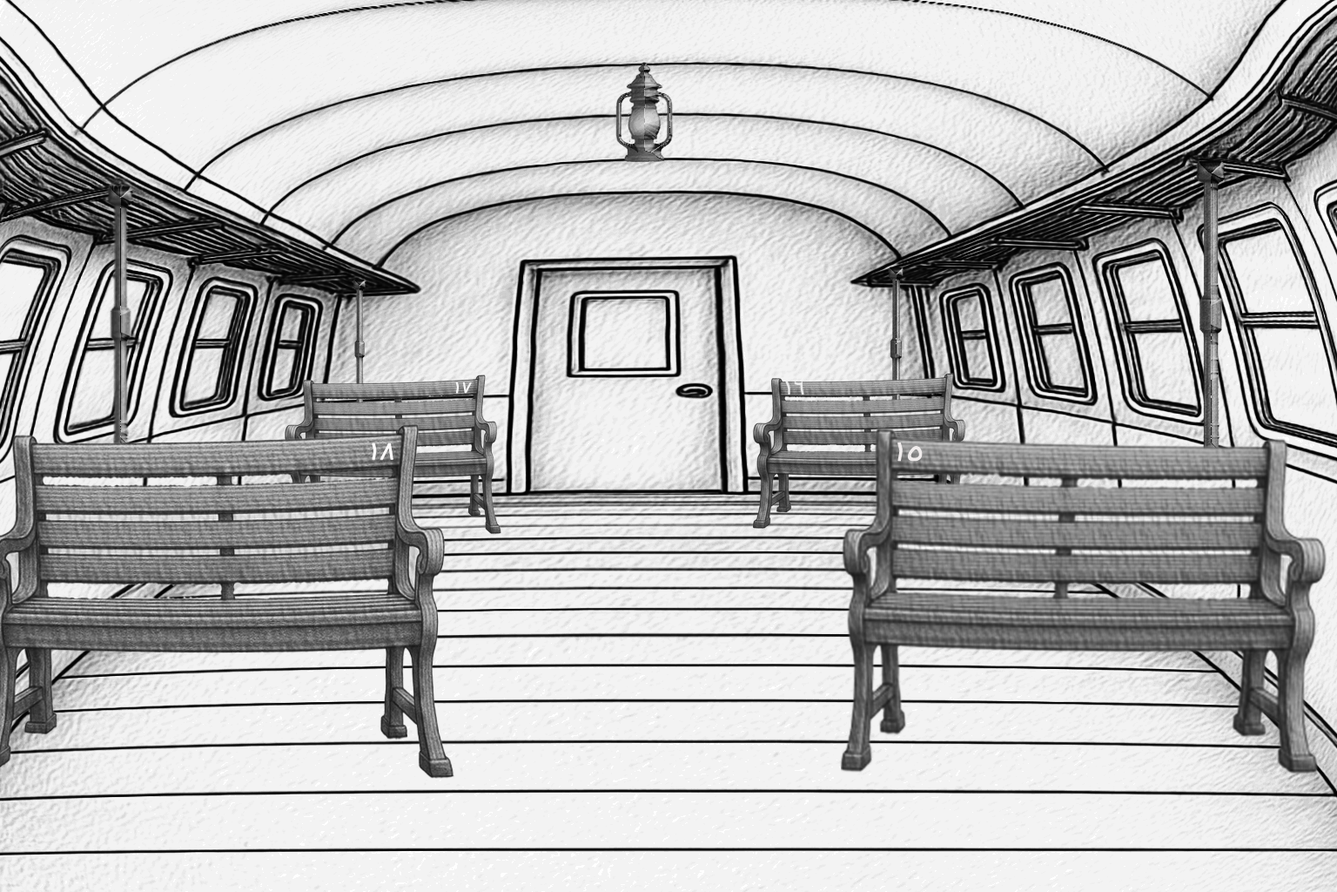
<style>
.page{position:relative;width:1337px;height:892px;background:#f3f3f3}
.page>*{position:absolute;margin:0}
.t1{font:15.2px "Tahoma";color:#f5f5f5;font-weight:bold;font-style:italic}
.t2{font:18.2px "Tahoma";color:#f6efef;font-weight:bold}
.t3{font:23.3px "Tahoma";color:#fcfafa;font-weight:bold;font-style:italic}
.t4{font:26.1px "Tahoma";color:#f0ecec;font-weight:bold;font-style:italic}
</style>
<div class="page">
<p class="t1" style="left:455px;top:382px;width:17px;height:12px">١٧</p>
<p class="t2" style="left:785px;top:381px;width:20px;height:13px">١٦</p>
<p class="t3" style="left:372px;top:442px;width:22px;height:18px">١٨</p>
<p class="t4" style="left:898px;top:442px;width:25px;height:19px">١٥</p>
</div>
